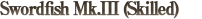
<style>
.page{position:relative;width:202px;height:19px;background:#ffffff}
.page>*{position:absolute;margin:0}
.t1{font:18px "RyuminPro-ExBold";letter-spacing:-0.08em;color:#4a3f32;font-weight:bold;scale:0.9 1}
</style>
<div class="page">
<p class="t1" style="left:0px;top:1px;width:179px;height:18px">Swordfish Mk.III (Skilled)</p>
</div>
